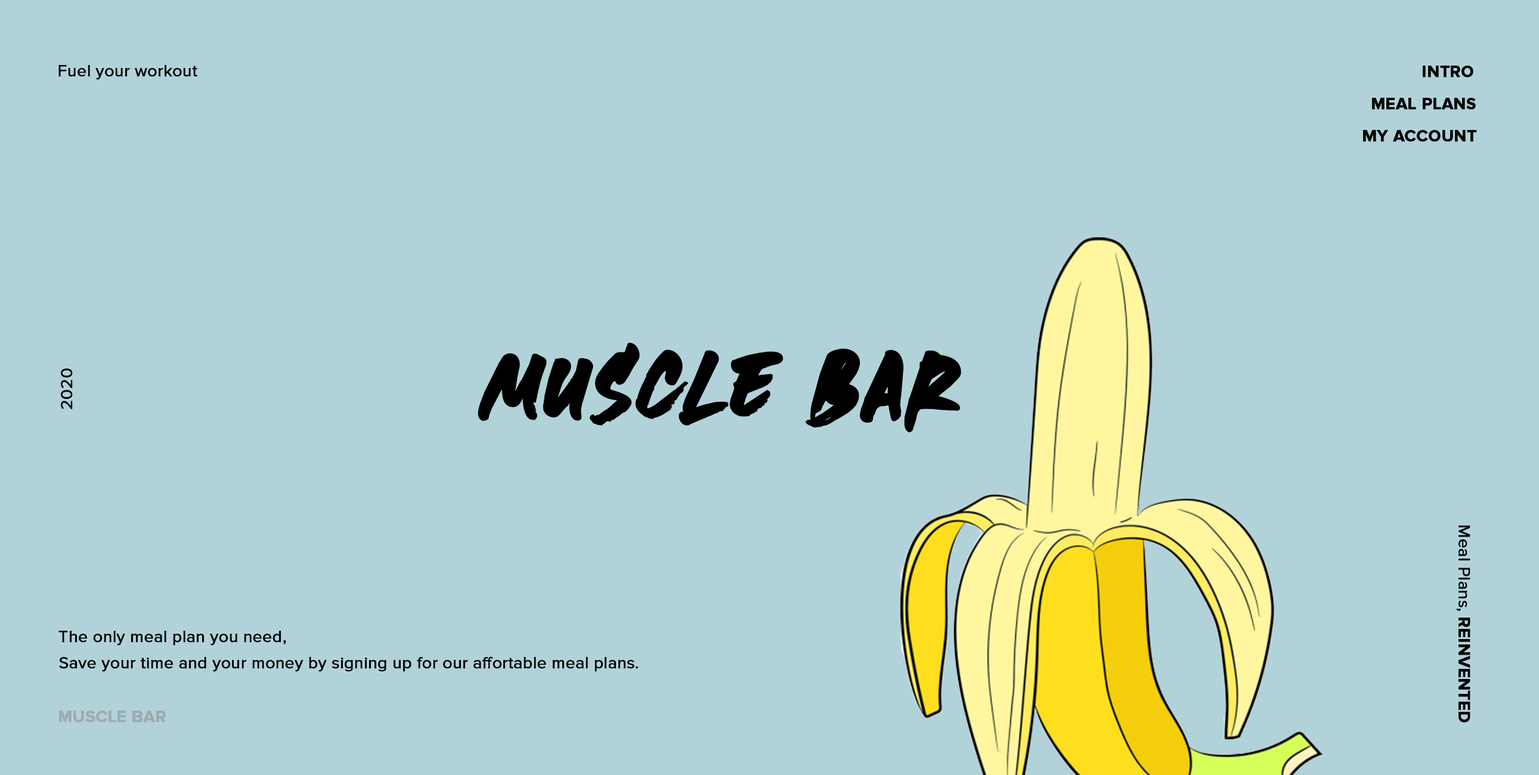
<style>
.page{position:relative;width:1539px;height:775px;background:#b2d2d9}
.page>*{position:absolute;margin:0}
.t1{font:16.7px "ProximaNova-Regular";color:#000000;font-weight:bold}
.t2{font:16.7px "ProximaNova-Bold";color:#000000;font-weight:bold}
.t3{font:134.1px "Heaters";color:#000000;font-weight:bold}
.t4{font:16.7px "ProximaNovaA-Bold";color:#9dadb1;font-weight:bold}
</style>
<div class="page">
<p class="t1" style="left:58px;top:65px;width:139px;height:15px">Fuel your workout</p>
<p class="t2" style="left:1422px;top:66px;width:51px;height:11px">INTRO</p>
<p class="t2" style="left:1372px;top:98px;width:103px;height:12px">MEAL PLANS</p>
<p class="t2" style="left:1363px;top:130px;width:114px;height:12px">MY ACCOUNT</p>
<p class="t3" style="left:478px;top:342px;width:483px;height:91px">MUSCLE BAR</p>
<p class="t1" style="left:61px;top:368px;width:12px;height:42px;rotate:-90deg">2020</p>
<p class="t1" style="left:1456px;top:525px;width:14px;height:198px;rotate:90deg">Meal Plans,<span class="t2"> REINVENTED</span></p>
<p class="t1" style="left:58px;top:631px;width:228px;height:15px">The only meal plan you need,</p>
<p class="t1" style="left:59px;top:656px;width:579px;height:16px">Save your time and your money by signing up for our affortable meal plans.</p>
<p class="t4" style="left:59px;top:711px;width:107px;height:12px">MUSCLE BAR</p>
</div>
